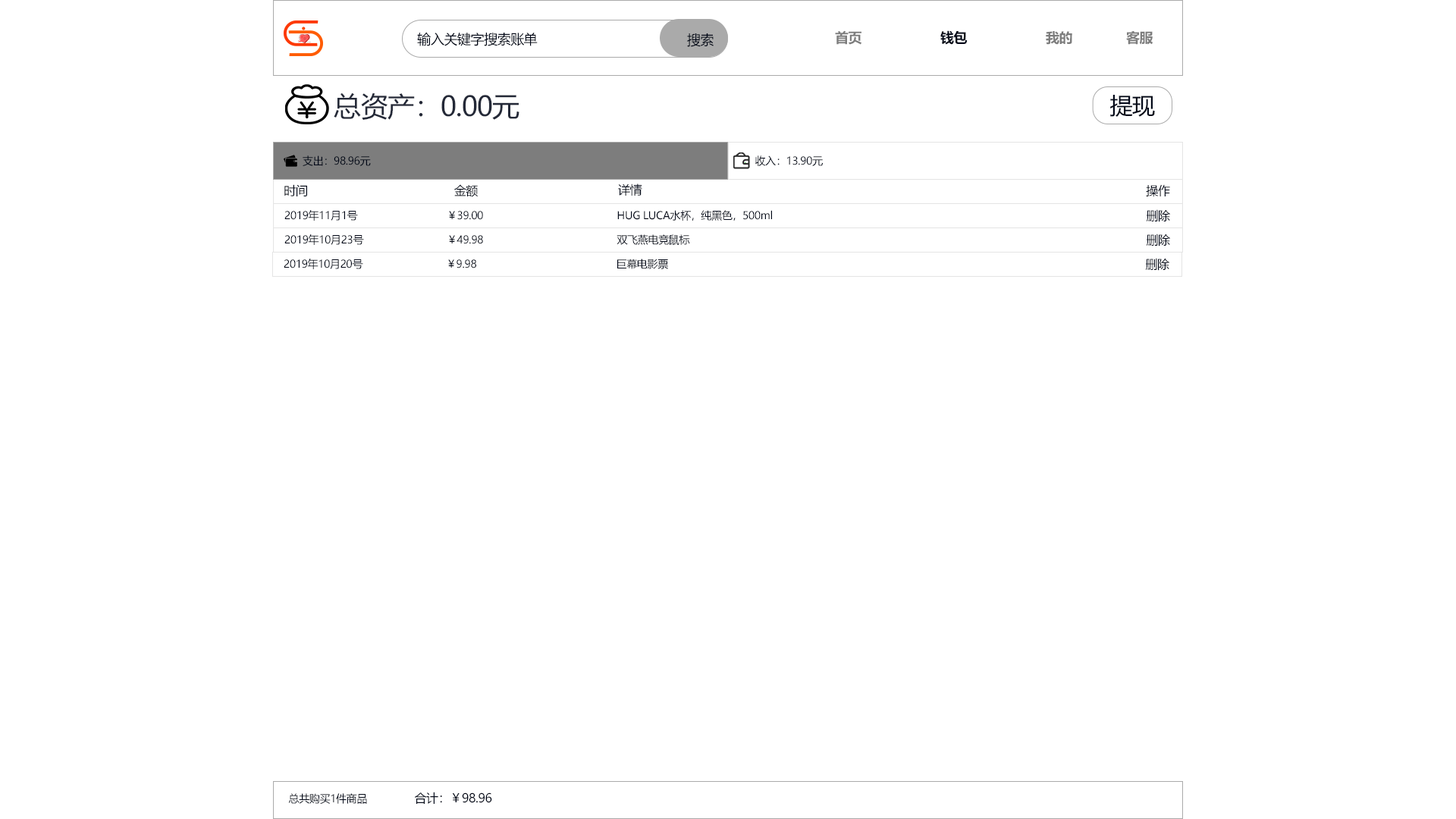
<style>
.page{position:relative;width:1456px;height:819px;background:#ffffff}
.page>*{position:absolute;margin:0}
.t1{font:13.6px "MicrosoftYaHei";letter-spacing:-0.024em;color:#010717}
.t2{font:13.6px "MicrosoftYaHei-Bold";letter-spacing:-0.024em;color:#7d7d7d}
.t3{font:13.6px "MicrosoftYaHei-Bold";letter-spacing:-0.024em;color:#010717}
.t4{font:27.3px "MicrosoftYaHei";letter-spacing:-0.024em;color:#242938}
.t5{font:22.7px "MicrosoftYaHei";letter-spacing:-0.024em;color:#020818}
.t6{font:10.6px "MicrosoftYaHei";letter-spacing:-0.024em;color:#010717}
.t7{font:12.1px "MicrosoftYaHei";letter-spacing:-0.024em;color:#010717}
</style>
<div class="page">
<p class="t1" style="left:417px;top:33px;width:121px;height:13px">输入关键字搜索账单</p>
<p class="t1" style="left:687px;top:33px;width:27px;height:14px">搜索</p>
<p class="t2" style="left:835px;top:30px;width:26px;height:15px">首页</p>
<p class="t3" style="left:940px;top:30px;width:28px;height:15px">钱包</p>
<p class="t2" style="left:1046px;top:31px;width:26px;height:14px">我的</p>
<p class="t2" style="left:1126px;top:31px;width:27px;height:14px">客服</p>
<p class="t4" style="left:334px;top:93px;width:185px;height:27px">总资产：0.00元</p>
<p class="t5" style="left:1110px;top:95px;width:45px;height:22px">提现</p>
<p class="t6" style="left:303px;top:155px;width:68px;height:11px">支出：98.96元</p>
<p class="t6" style="left:755px;top:155px;width:68px;height:11px">收入：13.90元</p>
<p class="t7" style="left:284px;top:184px;width:23px;height:12px">时间</p>
<p class="t7" style="left:454px;top:184px;width:24px;height:13px">金额</p>
<p class="t7" style="left:618px;top:184px;width:24px;height:12px">详情</p>
<p class="t7" style="left:1146px;top:184px;width:24px;height:13px">操作</p>
<p class="t7" style="left:1146px;top:209px;width:24px;height:13px">删除</p>
<p class="t6" style="left:284px;top:210px;width:74px;height:11px">2019年11月1号</p>
<p class="t6" style="left:449px;top:211px;width:34px;height:9px">￥39.00</p>
<p class="t6" style="left:617px;top:210px;width:155px;height:11px">HUG LUCA水杯，纯黑色，500ml</p>
<p class="t7" style="left:1146px;top:234px;width:24px;height:12px">删除</p>
<p class="t6" style="left:284px;top:234px;width:80px;height:11px">2019年10月23号</p>
<p class="t6" style="left:449px;top:235px;width:34px;height:9px">￥49.98</p>
<p class="t6" style="left:617px;top:234px;width:73px;height:12px">双飞燕电竞鼠标</p>
<p class="t7" style="left:1145px;top:258px;width:24px;height:13px">删除</p>
<p class="t6" style="left:284px;top:259px;width:79px;height:10px">2019年10月20号</p>
<p class="t6" style="left:448px;top:259px;width:28px;height:9px">￥9.98</p>
<p class="t6" style="left:617px;top:259px;width:51px;height:10px">巨幕电影票</p>
<p class="t6" style="left:288px;top:793px;width:79px;height:11px">总共购买1件商品</p>
<p class="t7" style="left:414px;top:792px;width:78px;height:12px">合计：￥98.96</p>
</div>
